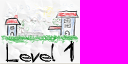
<style>
.page{position:relative;width:128px;height:64px;background:#ff00ff}
.page>*{position:absolute;margin:0}
.t1{font:24px "Daubed";color:#000000}
</style>
<div class="page">
<p class="t1" style="left:5px;top:40px;width:69px;height:23px">Level 1</p>
</div>
